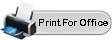
<style>
.page{position:relative;width:112px;height:40px;background:#ffffff}
.page>*{position:absolute;margin:0}
.t1{font:9.6px "ArialRoundedMTBold";color:#000000}
</style>
<div class="page">
<p class="t1" style="left:39px;top:19px;width:69px;height:7px">Print For Office</p>
</div>
